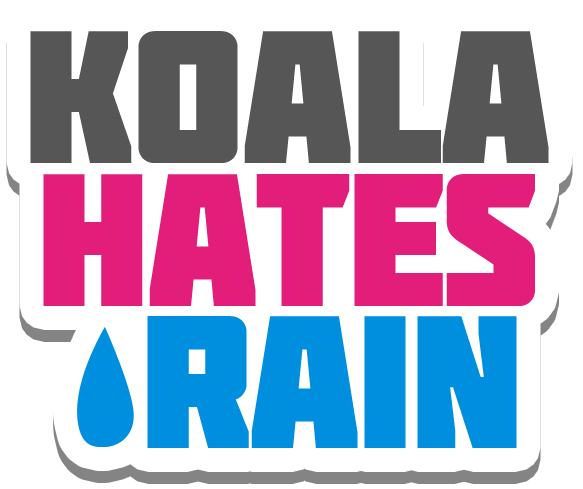
<style>
.page{position:relative;width:583px;height:489px;background:#ffffff}
.page>*{position:absolute;margin:0}
.t1{font:188.4px/142.3px "Molot";letter-spacing:-0.02em;color:#565656}
.t2{font:188.4px/142.3px "Molot";letter-spacing:-0.02em;color:#e21d7a}
.t3{font:188.4px/142.3px "Molot";letter-spacing:-0.02em;color:#008edf}
</style>
<div class="page">
<p class="t1" style="left:30px;top:31px;width:519px;height:417px;text-align:center">koala<br><span class="t2">hates<br> </span><span class="t3">rain</span></p>
</div>
